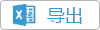
<style>
.page{position:relative;width:100px;height:30px;background:#ffffff}
.page>*{position:absolute;margin:0}
.t1{font:18px "MicrosoftYaHei";color:#3998d6}
</style>
<div class="page">
<p class="t1" style="left:47px;top:7px;width:35px;height:17px">导出</p>
</div>
